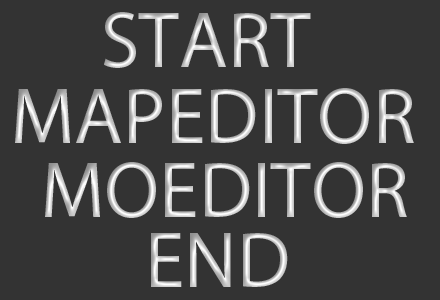
<style>
.page{position:relative;width:440px;height:300px;background:#333333}
.page>*{position:absolute;margin:0}
.t1{font:80px "MyriadPro-Regular"}
</style>
<div class="page">
<p class="t1" style="left:104px;top:12px;width:207px;height:56px">START</p>
<p class="t1" style="left:15px;top:88px;width:399px;height:56px">MAPEDITOR</p>
<p class="t1" style="left:45px;top:162px;width:362px;height:56px">MOEDITOR</p>
<p class="t1" style="left:151px;top:233px;width:137px;height:54px">END</p>
</div>
